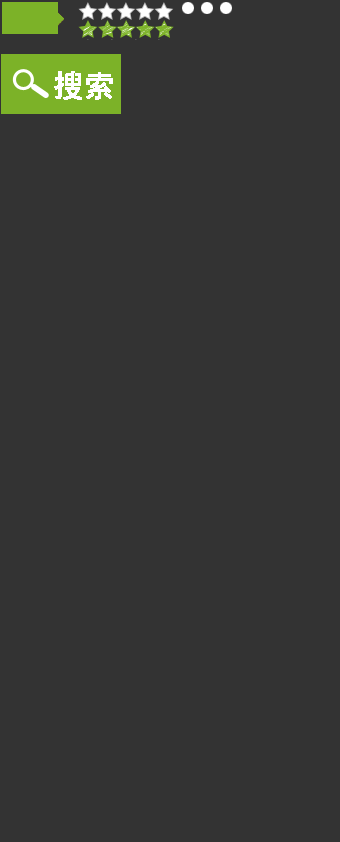
<style>
.page{position:relative;width:340px;height:842px;background:#333333}
.page>*{position:absolute;margin:0}
.t1{font:30px "SimHei";color:#ffffff;font-weight:bold}
</style>
<div class="page">
<p class="t1" style="left:54px;top:71px;width:59px;height:29px">搜索</p>
</div>
